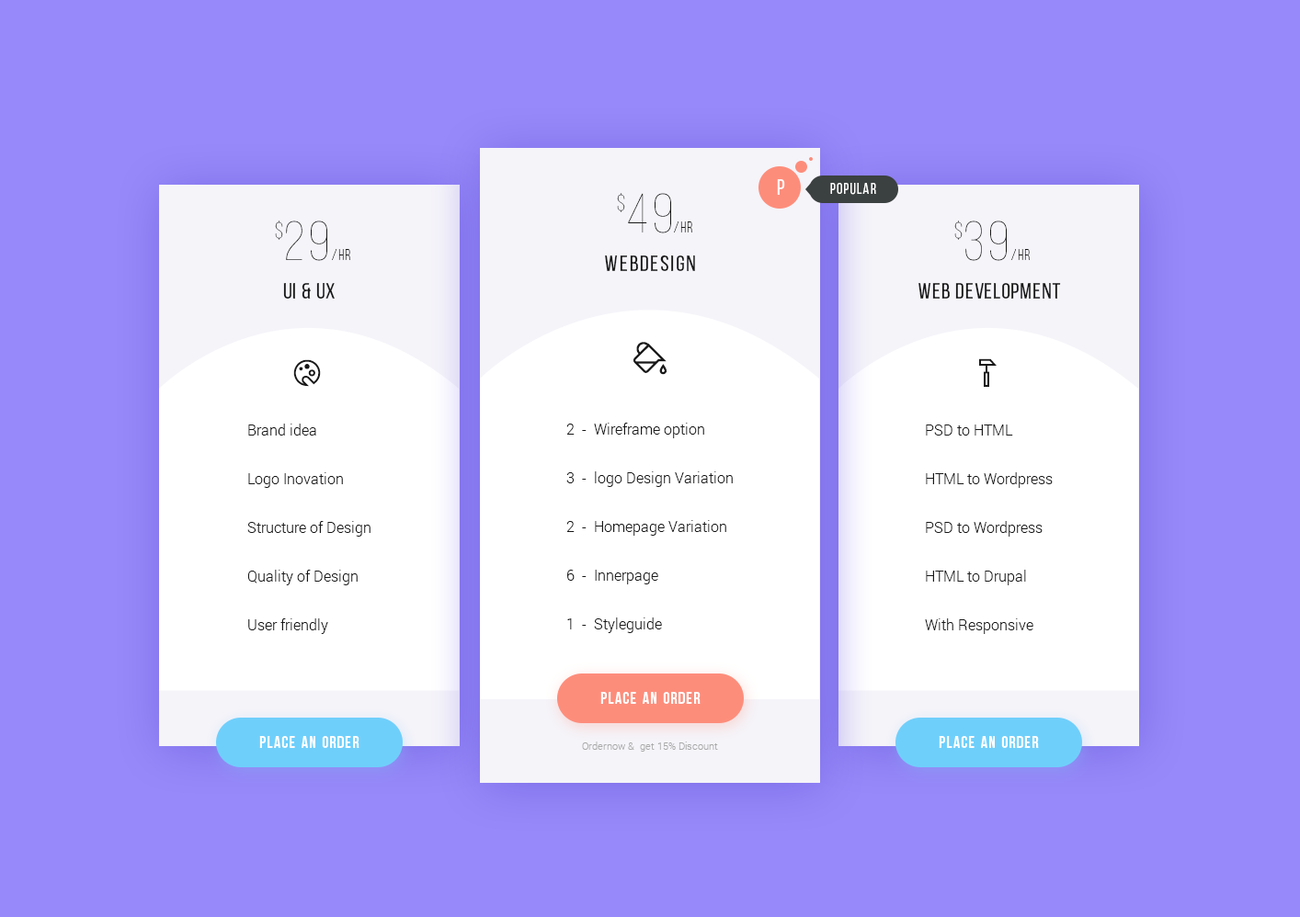
<style>
.page{position:relative;width:1300px;height:917px;background:#9789f9}
.page>*{position:absolute;margin:0}
.t1{font:22.1px "BebasNeueRegular";letter-spacing:0.08em;color:#ffffff;text-transform:uppercase}
.t2{font:14.7px "BebasNeueRegular";letter-spacing:0.08em;color:#ffffff;text-transform:uppercase}
.t3{font:22.1px "BebasNeue-Thin";letter-spacing:0.08em;text-transform:uppercase}
.t4{font:55.2px "BebasNeue-Thin";letter-spacing:0.08em;color:#181818;text-transform:uppercase}
.t5{font:14.7px "BebasNeueLight";letter-spacing:0.08em;color:#181818}
.t6{font:22.1px "BebasNeueRegular";letter-spacing:0.08em;color:#181818;text-transform:uppercase}
.t7{font:22.1px "BebasNeueRegular";letter-spacing:0.04em;color:#181818;text-transform:uppercase}
.t8{font:14.7px/48.7px "Roboto-Light";color:#181818}
.t9{font:16.5px "BebasNeueBold";letter-spacing:0.08em;color:#ffffff}
.t10{font:10.1px "Roboto-Light";color:#a9a9a9}
</style>
<div class="page">
<p class="t1" style="left:777px;top:179px;width:8px;height:16px">P</p>
<p class="t2" style="left:830px;top:183px;width:46px;height:12px">Popular</p>
<p class="t3" style="left:617px;top:193px;width:8px;height:19px">$</p>
<p class="t4" style="left:628px;top:193px;width:43px;height:40px">49</p>
<p class="t3" style="left:275px;top:221px;width:8px;height:19px">$</p>
<p class="t4" style="left:286px;top:221px;width:41px;height:40px">29</p>
<p class="t5" style="left:674px;top:222px;width:18px;height:11px">/HR</p>
<p class="t3" style="left:954px;top:221px;width:8px;height:19px">$</p>
<p class="t4" style="left:965px;top:221px;width:42px;height:40px">39</p>
<p class="t5" style="left:332px;top:249px;width:18px;height:11px">/HR</p>
<p class="t6" style="left:605px;top:255px;width:90px;height:16px">Webdesign</p>
<p class="t5" style="left:1011px;top:249px;width:19px;height:11px">/HR</p>
<p class="t7" style="left:283px;top:283px;width:52px;height:16px">UI &amp; Ux</p>
<p class="t7" style="left:918px;top:283px;width:143px;height:16px">Web development</p>
<p class="t8" style="left:247px;top:424px;width:123px;height:210px">Brand idea<br>Logo Inovation<br>Structure of Design<br>Quality of Design<br>User friendly</p>
<p class="t8" style="left:566px;top:423px;width:167px;height:210px">2  -  Wireframe option<br>3  -  logo Design Variation<br>2  -  Homepage Variation<br>6  -  Innerpage<br>1  -  Styleguide</p>
<p class="t8" style="left:925px;top:425px;width:128px;height:209px">PSD to HTML<br>HTML to Wordpress<br>PSD to Wordpress<br>HTML to Drupal<br>With Responsive</p>
<p class="t9" style="left:600px;top:692px;width:100px;height:12px">Place an order</p>
<p class="t9" style="left:259px;top:736px;width:100px;height:12px">Place an order</p>
<p class="t9" style="left:939px;top:736px;width:100px;height:12px">Place an order</p>
<p class="t10" style="left:582px;top:742px;width:136px;height:10px">Ordernow &amp;  get 15% Discount</p>
</div>
